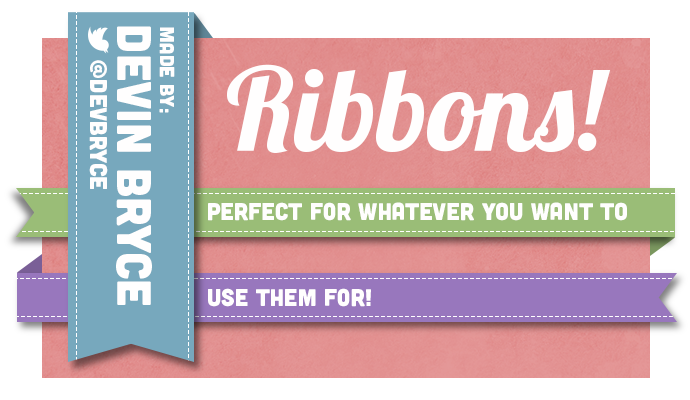
<style>
.page{position:relative;width:690px;height:400px;background:#ffffff}
.page>*{position:absolute;margin:0}
.t1{font:48.7px "Cubano-Regular";color:#fffefe}
.t2{font:20px "Cubano-Regular";color:#fffefe}
.t3{font:24.1px "Cubano-Regular";color:#fffefe}
.t4{font:115px "Lobster1.4";color:#fffefe}
.t5{font:24px "Cubano-Regular";color:#fffefe}
</style>
<div class="page">
<p class="t1" style="left:116px;top:26px;width:36px;height:279px;rotate:90deg">Devin Bryce</p>
<p class="t2" style="left:159px;top:27px;width:16px;height:86px;rotate:90deg">Made by:</p>
<p class="t3" style="left:89px;top:60px;width:19px;height:129px;rotate:90deg">@devbryce</p>
<p class="t4" style="left:227px;top:64px;width:384px;height:89px">Ribbons!</p>
<p class="t5" style="left:208px;top:202px;width:419px;height:19px">Perfect for whatever you want to</p>
<p class="t5" style="left:208px;top:288px;width:163px;height:19px">use them for!</p>
</div>
